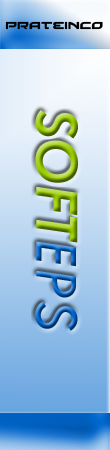
<style>
.page{position:relative;width:110px;height:450px}
.page>*{position:absolute;margin:0}
.t1{font:64px "TwCenMT-BoldItalic"}
.t2{font:64px "TwCenMT-Italic"}
</style>
<div class="page">
<p class="t1" style="left:35px;top:109px;width:43px;height:222px;rotate:90deg">SOFT<span class="t2">EPS</span></p>
</div>
